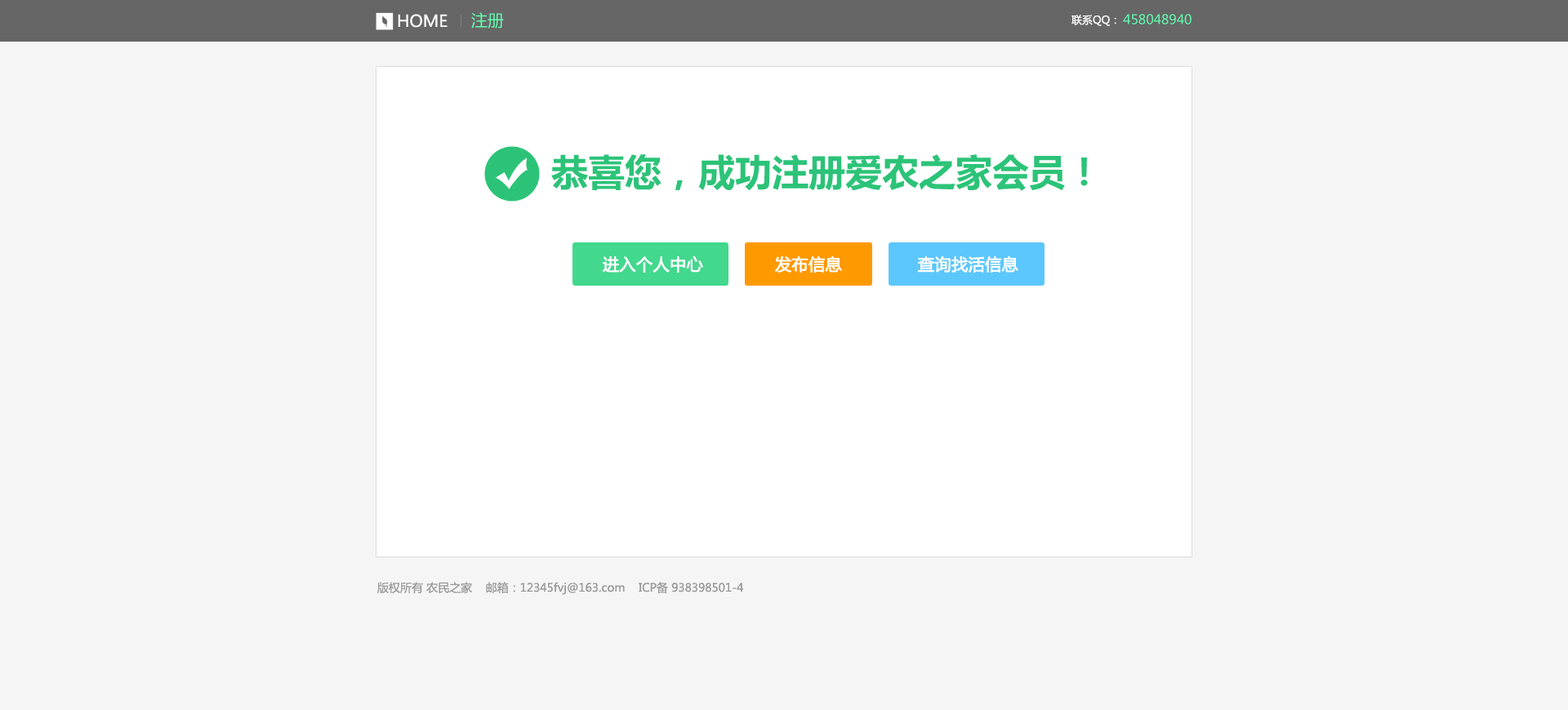
<style>
.page{position:relative;width:1568px;height:710px;background:#f5f5f5}
.page>*{position:absolute;margin:0}
.t1{font:16.3px "MicrosoftYaHei";color:#ffffff;text-transform:uppercase}
.t2{font:16.3px "MicrosoftYaHei";color:#61feaf;text-transform:uppercase}
.t3{font:10.6px "MicrosoftYaHei";color:#ffffff;text-transform:uppercase}
.t4{font:13.1px "MicrosoftYaHei";color:#60fdaf;text-transform:uppercase}
.t5{font:36.8px "MicrosoftYaHei-Bold";color:#2cc378}
.t6{font:16.3px "MicrosoftYaHei";color:#ffffff;text-transform:uppercase;font-weight:bold}
.t7{font:11.4px "MicrosoftYaHei";color:#999999}
</style>
<div class="page">
<p class="t1" style="left:398px;top:14px;width:50px;height:14px">home</p>
<p class="t2" style="left:471px;top:12px;width:33px;height:17px">注册</p>
<p class="t3" style="left:1071px;top:15px;width:45px;height:11px">联系qq：</p>
<p class="t4" style="left:1123px;top:14px;width:69px;height:10px">458048940</p>
<p class="t5" style="left:551px;top:154px;width:537px;height:37px">恭喜您，成功注册爱农之家会员！</p>
<p class="t6" style="left:602px;top:256px;width:101px;height:17px">进入个人中心</p>
<p class="t6" style="left:774px;top:256px;width:68px;height:18px">发布信息</p>
<p class="t6" style="left:918px;top:256px;width:100px;height:17px">查询找活信息</p>
<p class="t7" style="left:377px;top:582px;width:366px;height:13px">版权所有 农民之家    邮箱：12345fvj@163.com    ICP备 938398501-4</p>
</div>
